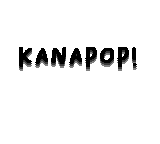
<style>
.page{position:relative;width:160px;height:144px;background:#ffffff}
.page>*{position:absolute;margin:0}
.t1{font:24px "BaksoSapi"}
.t2{font:24px "BaksoSapi";color:#000000}
</style>
<div class="page">
<p class="t1" style="left:18px;top:50px;width:119px;height:22px">KANAPOP!</p>
<p class="t2" style="left:18px;top:48px;width:119px;height:22px">KANAPOP!</p>
<p class="t2" style="left:18px;top:46px;width:119px;height:22px">KANAPOP!</p>
</div>
